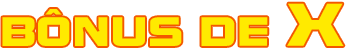
<style>
.page{position:relative;width:346px;height:48px;background:#ffffff}
.page>*{position:absolute;margin:0}
.t1{font:45.3px "DFSoGeiStd-W9";color:#ffea00;scale:1.07 1}
.t2{font:66.7px "DFSoGeiStd-W9";color:#ffea00;scale:1.07 1}
</style>
<div class="page">
<p class="t1" style="left:2px;top:3px;width:342px;height:43px">BÔNUS DE <span class="t2">X</span></p>
</div>
